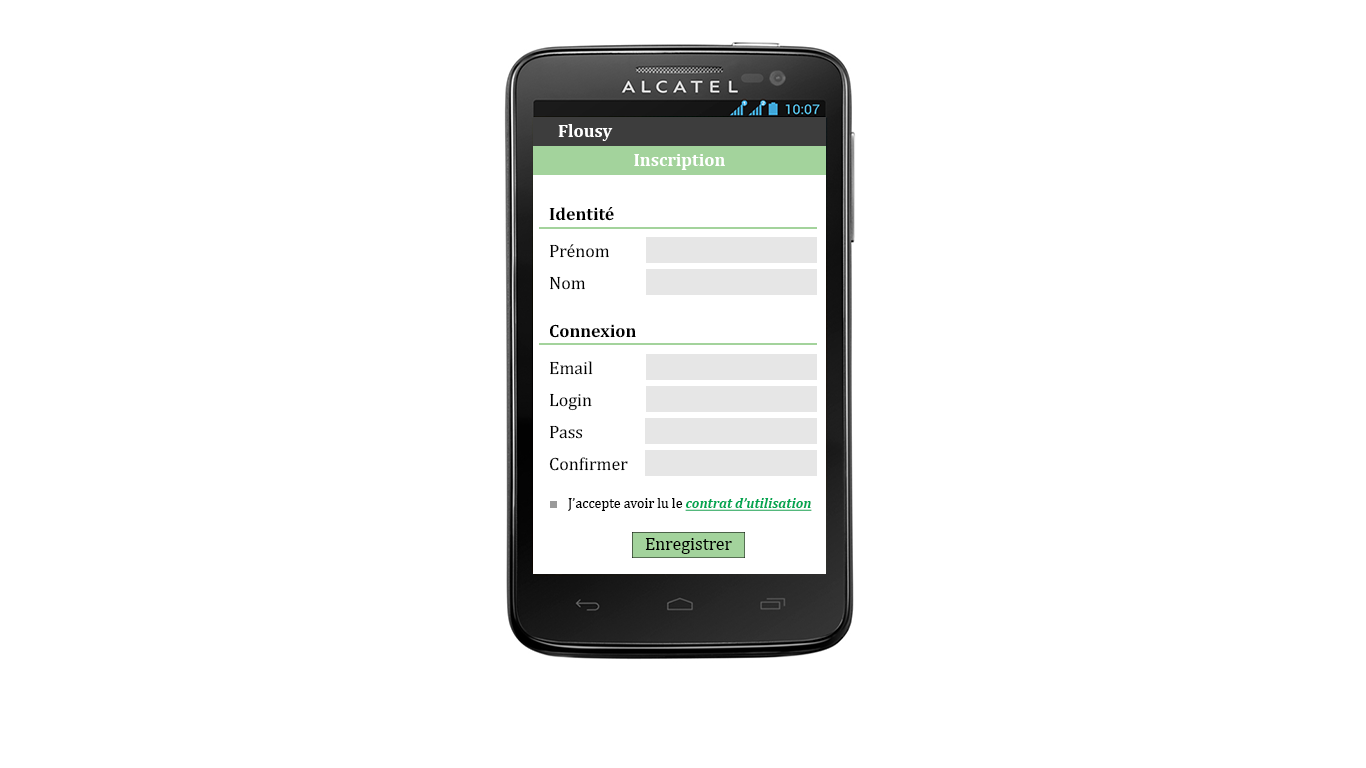
<style>
.page{position:relative;width:1366px;height:768px;background:#ffffff}
.page>*{position:absolute;margin:0}
.t1{font:18px "Cambria-Bold";color:#ffffff}
.t2{font:18px "Cambria-Bold";color:#000000}
.t3{font:18px "Cambria";color:#000000}
.t4{font:14px "Cambria";color:#000000}
.t5{font:14px "Cambria-BoldItalic";color:#00a651;text-decoration:underline}
.t6{font:17.9px "Cambria";color:#000000}
</style>
<div class="page">
<p class="t1" style="left:558px;top:124px;width:55px;height:17px">Flousy</p>
<p class="t1" style="left:634px;top:154px;width:91px;height:16px">Inscription</p>
<p class="t2" style="left:549px;top:207px;width:65px;height:14px">Identité</p>
<p class="t3" style="left:550px;top:244px;width:59px;height:14px">Prénom</p>
<p class="t3" style="left:550px;top:276px;width:35px;height:14px">Nom</p>
<p class="t2" style="left:550px;top:324px;width:86px;height:14px">Connexion</p>
<p class="t3" style="left:550px;top:361px;width:43px;height:14px">Email</p>
<p class="t3" style="left:550px;top:393px;width:42px;height:18px">Login</p>
<p class="t3" style="left:550px;top:425px;width:33px;height:14px">Pass</p>
<p class="t3" style="left:549px;top:457px;width:79px;height:14px">Confirmer</p>
<p class="t4" style="left:568px;top:498px;width:244px;height:13px">J’accepte avoir lu le <span class="t5">contrat d’utilisation</span></p>
<p class="t6" style="left:645px;top:538px;width:87px;height:16px">Enregistrer</p>
</div>
